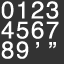
<style>
.page{position:relative;width:64px;height:64px;background:#333333}
.page>*{position:absolute;margin:0}
.t1{font:24px/20px "Helvetica";letter-spacing:-0.105em;color:#ffffff}
.t2{font:24px "Helvetica";letter-spacing:-0.105em;color:#ffffff}
</style>
<div class="page">
<p class="t1" style="left:1px;top:1px;width:58px;height:58px">0 1 2 3 <br>4 5 6 7<br>8 9</p>
<p class="t2" style="left:36px;top:42px;width:3px;height:7px">’</p>
<p class="t2" style="left:49px;top:42px;width:7px;height:7px">”</p>
</div>
